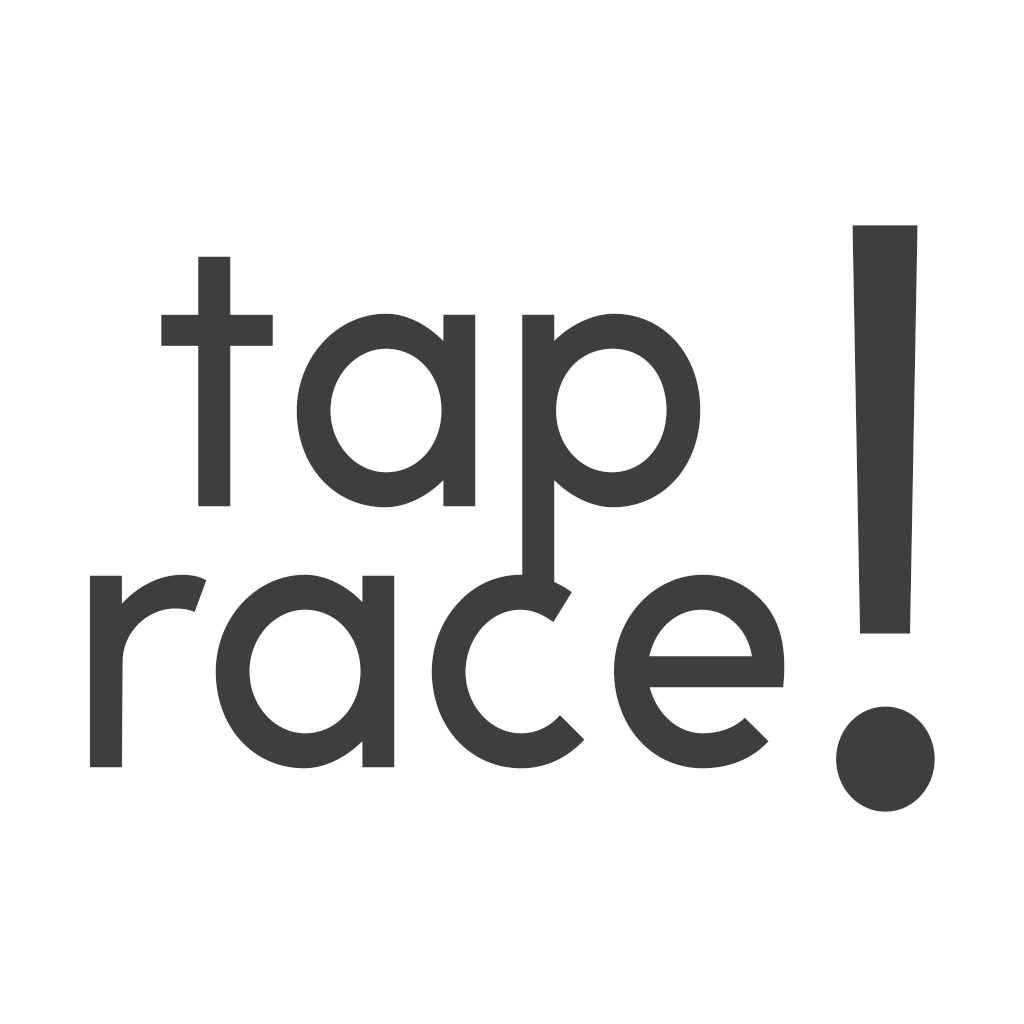
<style>
.page{position:relative;width:1024px;height:1024px;background:#ffffff}
.page>*{position:absolute;margin:0}
.t1{font:774.1px "APompadourSample";color:#3e3e3e;font-weight:bold;scale:0.97 1}
.t2{font:382.7px/260.9px "APompadourSample";color:#3e3e3e;font-weight:bold;scale:0.97 1}
</style>
<div class="page">
<p class="t1" style="left:836px;top:225px;width:99px;height:587px">!</p>
<p class="t2" style="left:89px;top:256px;width:696px;height:513px;text-align:center">tap<br>race</p>
</div>
